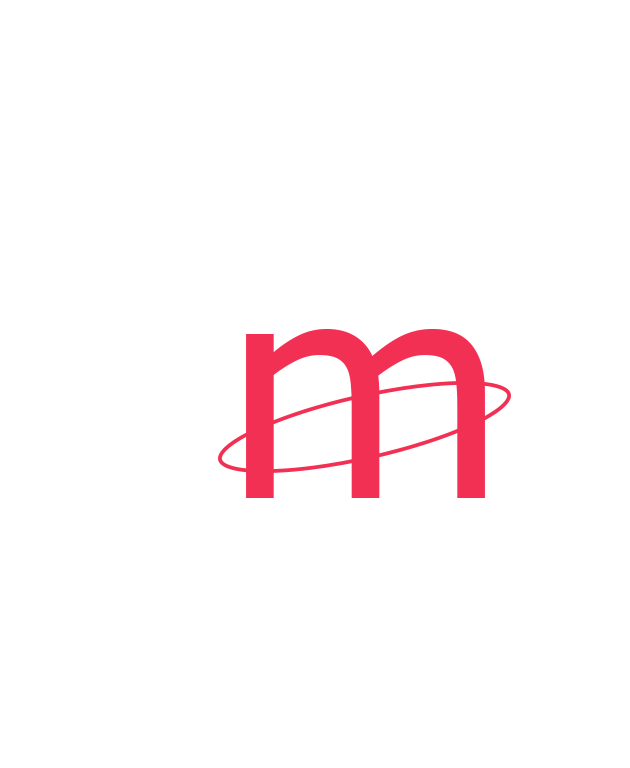
<style>
.page{position:relative;width:630px;height:768px;background:#ffffff}
.page>*{position:absolute;margin:0}
.t1{font:300px "MSReferenceSansSerif";color:#f23054}
</style>
<div class="page">
<p class="t1" style="left:246px;top:329px;width:239px;height:169px">m</p>
</div>
